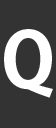
<style>
.page{position:relative;width:56px;height:128px;background:#333333}
.page>*{position:absolute;margin:0}
.t1{font:75px "AdobeGothicStd-Bold";color:#ffffff}
</style>
<div class="page">
<p class="t1" style="left:4px;top:29px;width:49px;height:69px">Q</p>
</div>
